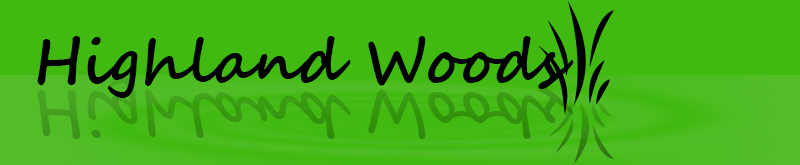
<style>
.page{position:relative;width:800px;height:165px;background:#40b910}
.page>*{position:absolute;margin:0}
.t1{font:60px "SegoeScript-Bold";color:#000000}
</style>
<div class="page">
<p class="t1" style="left:37px;top:36px;width:537px;height:62px">Highland Woods</p>
</div>
